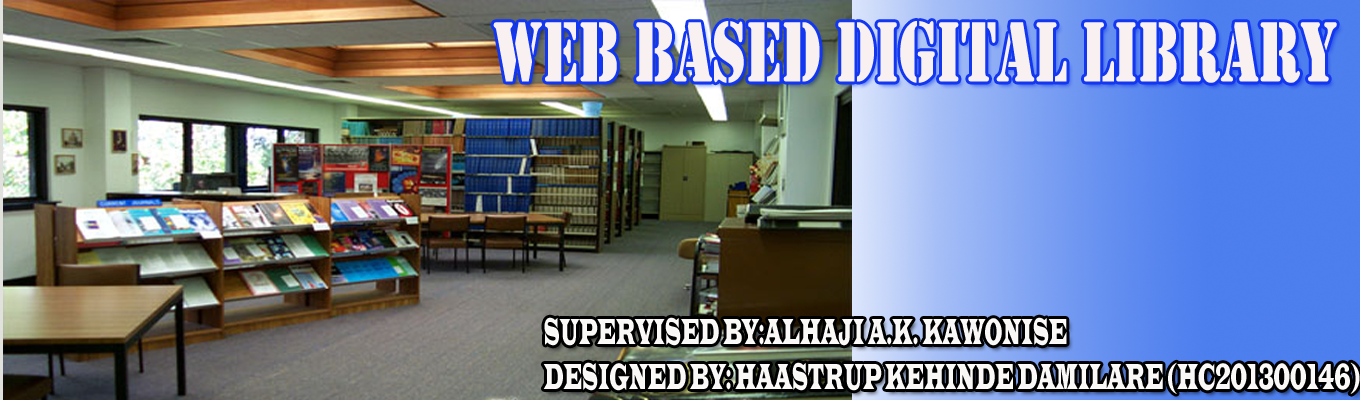
<style>
.page{position:relative;width:1360px;height:400px}
.page>*{position:absolute;margin:0}
.t1{font:88.8px "Stencil";color:#f9f1f1;scale:0.68 1}
.t2{font:37.5px "LatinWide";color:#f8f5f5;scale:0.35 1}
</style>
<div class="page">
<p class="t1" style="left:493px;top:21px;width:844px;height:62px">WEB BASED DIGITAL LIBRARY</p>
<p class="t2" style="left:543px;top:317px;width:817px;height:77px">SUPERVISED BY:ALHAJI A.K. KAWONISE<br>DESIGNED BY: HAASTRUP KEHINDE DAMILARE (HC201300146)</p>
</div>
